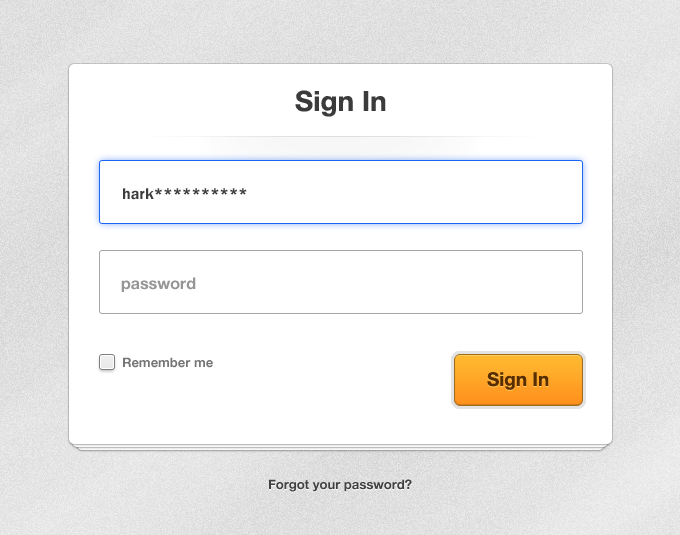
<style>
.page{position:relative;width:680px;height:535px;background:#ffffff}
.page>*{position:absolute;margin:0}
.t1{font:28px "HelveticaNeue-Bold";color:#3b3b3b}
.t2{font:16px "FranklinGothic-Demi";color:#3b3b3b}
.t3{font:16px "HelveticaNeue-Bold";color:#959595}
.t4{font:13px "HelveticaNeue-Bold";color:#767676}
.t5{font:19px "HelveticaNeue-Bold";color:#582e00}
.t6{font:13px "HelveticaNeue-Bold";color:#414141}
</style>
<div class="page">
<p class="t1" style="left:295px;top:90px;width:91px;height:27px">Sign In</p>
<p class="t2" style="left:123px;top:188px;width:124px;height:12px">hark**********</p>
<p class="t3" style="left:121px;top:277px;width:75px;height:15px">password</p>
<p class="t4" style="left:123px;top:357px;width:90px;height:11px">Remember me</p>
<p class="t5" style="left:487px;top:372px;width:62px;height:18px">Sign In</p>
<p class="t6" style="left:269px;top:479px;width:143px;height:13px">Forgot your password?</p>
</div>
